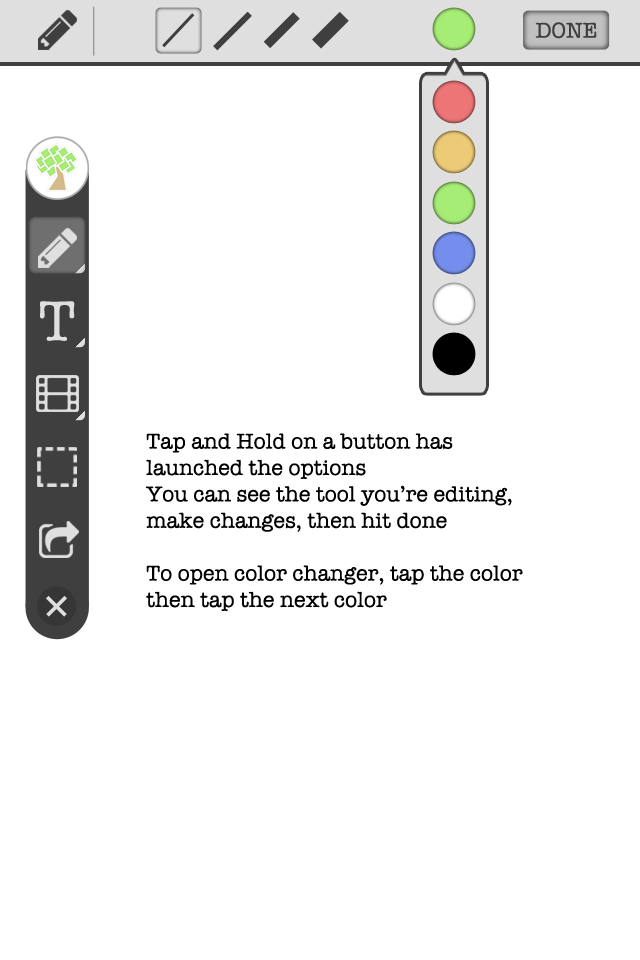
<style>
.page{position:relative;width:640px;height:960px;background:#ffffff}
.page>*{position:absolute;margin:0}
.t1{font:22px "AmericanTypewriter";color:#3f3f3f}
.t2{font:58.3px "AmericanTypewriter";color:#dfdfdf}
.t3{font:22px "AmericanTypewriter";color:#000000}
</style>
<div class="page">
<p class="t1" style="left:535px;top:22px;width:62px;height:17px">DONE</p>
<p class="t2" style="left:40px;top:301px;width:35px;height:40px">T</p>
<p class="t3" style="left:145px;top:433px;width:378px;height:178px">Tap and Hold on a button has <br>launched the options<br>You can see the tool you’re editing,<br>make changes, then hit done<br><br>To open color changer, tap the color<br>then tap the next color</p>
</div>
